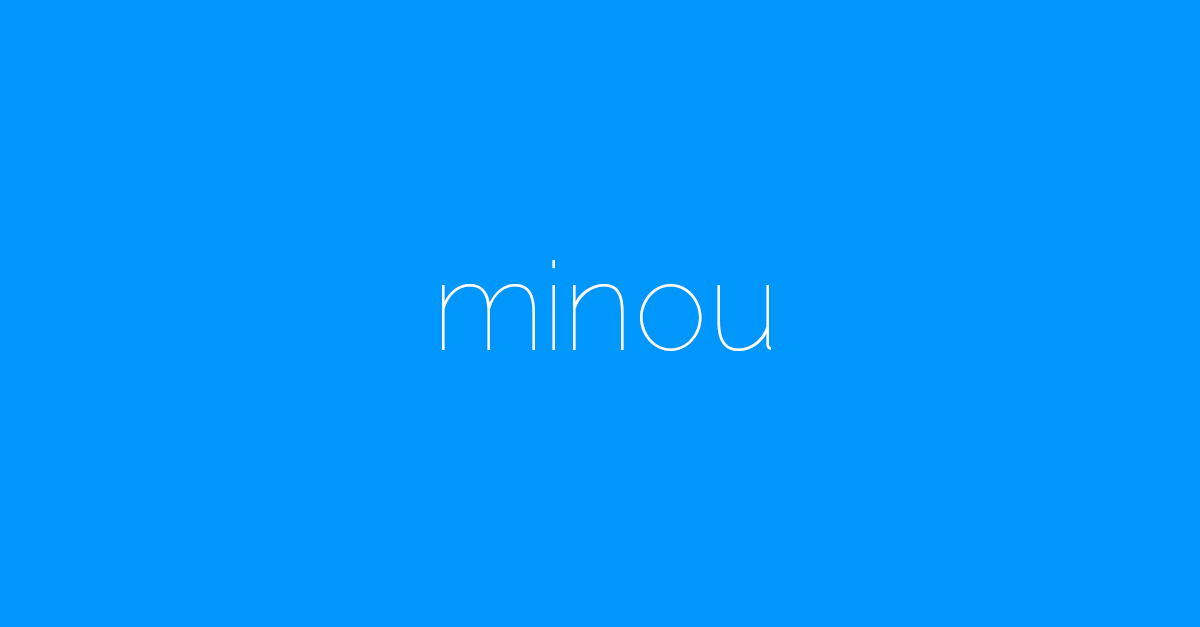
<style>
.page{position:relative;width:1200px;height:627px;background:#0097fd}
.page>*{position:absolute;margin:0}
.t1{font:125px "Raleway-Thin";color:#ffffff}
</style>
<div class="page">
<p class="t1" style="left:442px;top:260px;width:329px;height:91px">minou</p>
</div>
